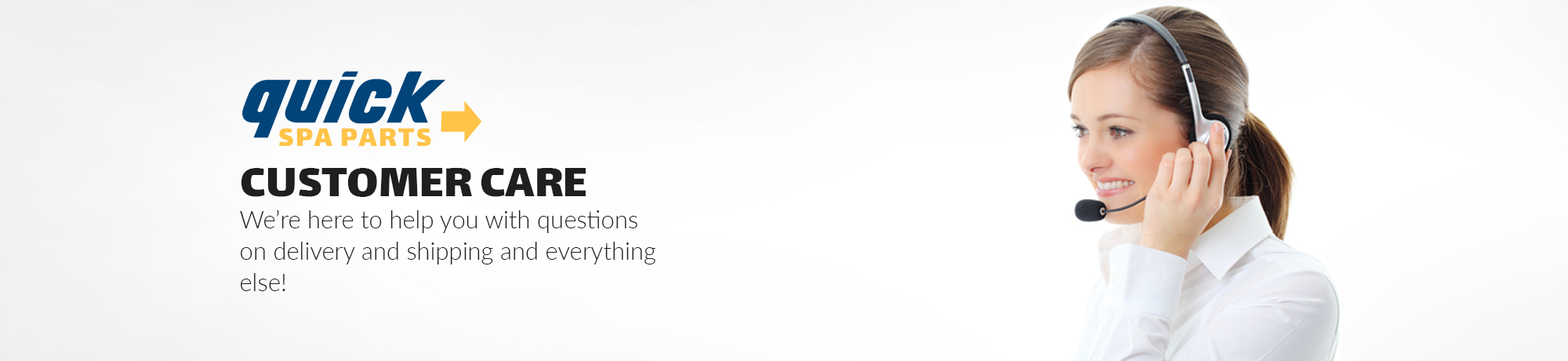
<style>
.page{position:relative;width:1568px;height:361px}
.page>*{position:absolute;margin:0}
.t1{font:49.6px "Lalezar-Regular";color:#1f1f1f}
.t2{font:24.3px/31.7px "Lato-Light";color:#1f1f1f}
</style>
<div class="page">
<p class="t1" style="left:241px;top:168px;width:345px;height:29px">CUSTOMER CARE</p>
<p class="t2" style="left:240px;top:209px;width:415px;height:82px">We’re here to help you with questions<br>on delivery and shipping and everything<br>else!</p>
</div>
